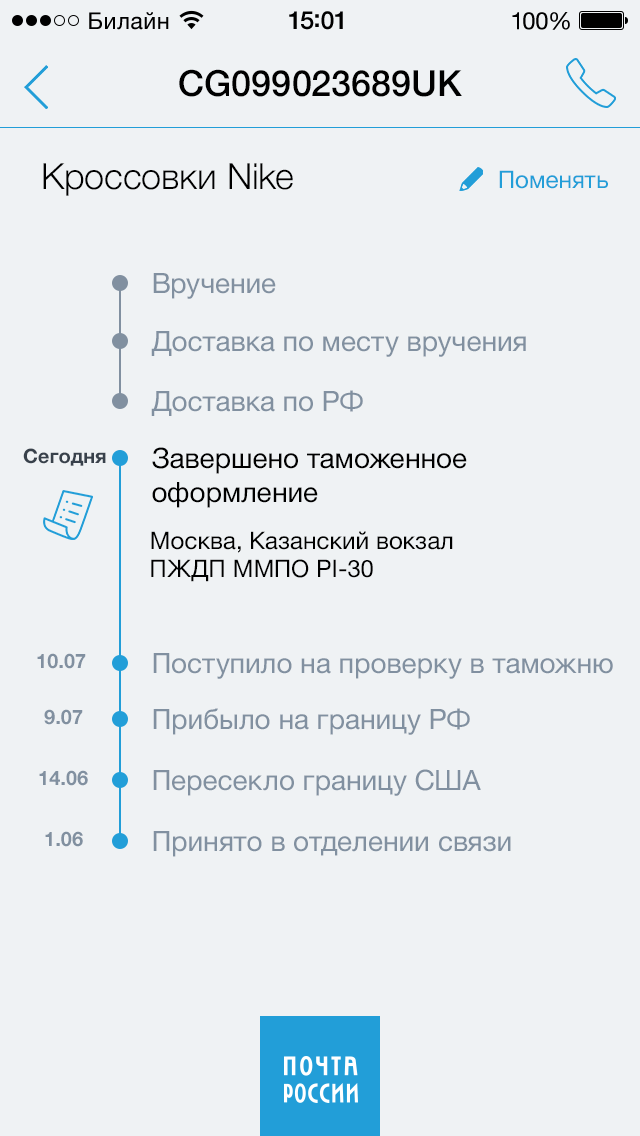
<style>
.page{position:relative;width:640px;height:1136px;background:#eff2f4}
.page>*{position:absolute;margin:0}
.t1{font:36px "HelveticaNeue-Medium";color:#000000}
.t2{font:36px "HelveticaNeue-Light";color:#000000}
.t3{font:24px "HelveticaNeue";color:#229ed8}
.t4{font:28px "HelveticaNeue";color:#8190a0}
.t5{font:20px "HelveticaNeue-Bold";color:#38414b}
.t6{font:28px "HelveticaNeue";color:#000000}
.t7{font:24px "HelveticaNeue";color:#000000}
.t8{font:20px "HelveticaNeue-Bold";color:#8190a0}
</style>
<div class="page">
<p class="t1" style="left:179px;top:69px;width:283px;height:28px">CG099023689UK</p>
<p class="t2" style="left:43px;top:163px;width:250px;height:33px">Кроссовки Nike</p>
<p class="t3" style="left:499px;top:170px;width:109px;height:19px">Поменять</p>
<p class="t4" style="left:153px;top:273px;width:123px;height:26px">Вручение</p>
<p class="t4" style="left:151px;top:331px;width:375px;height:26px">Доставка по месту вручения</p>
<p class="t4" style="left:151px;top:390px;width:212px;height:26px">Доставка по РФ</p>
<p class="t5" style="left:23px;top:448px;width:83px;height:18px">Сегодня</p>
<p class="t6" style="left:152px;top:447px;width:315px;height:61px">Завершено таможенное <br>оформление</p>
<p class="t7" style="left:151px;top:531px;width:302px;height:51px">Москва, Казанский вокзал <br>ПЖДП ММПО PI-30</p>
<p class="t8" style="left:37px;top:653px;width:49px;height:16px">10.07</p>
<p class="t4" style="left:153px;top:653px;width:460px;height:26px">Поступило на проверку в таможню</p>
<p class="t8" style="left:44px;top:709px;width:39px;height:16px">9.07</p>
<p class="t4" style="left:153px;top:708px;width:317px;height:27px">Прибыло на границу РФ</p>
<p class="t8" style="left:39px;top:770px;width:49px;height:16px">14.06</p>
<p class="t4" style="left:153px;top:769px;width:328px;height:27px">Пересекло границу США</p>
<p class="t8" style="left:45px;top:831px;width:38px;height:16px">1.06</p>
<p class="t4" style="left:153px;top:831px;width:358px;height:26px">Принято в отделении связи</p>
</div>
